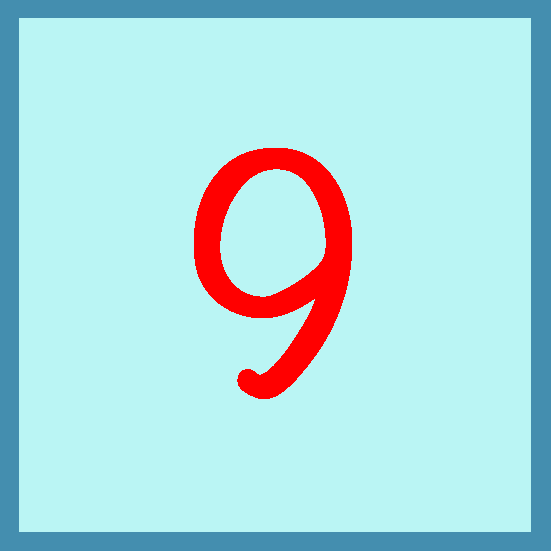
<style>
.page{position:relative;width:551px;height:551px;background:#baf5f4}
.page>*{position:absolute;margin:0}
.t1{font:280px "Noteworthy-Light";letter-spacing:0.02em;color:#ff0000;font-weight:bold}
</style>
<div class="page">
<p class="t1" style="left:194px;top:148px;width:158px;height:251px">9</p>
</div>
